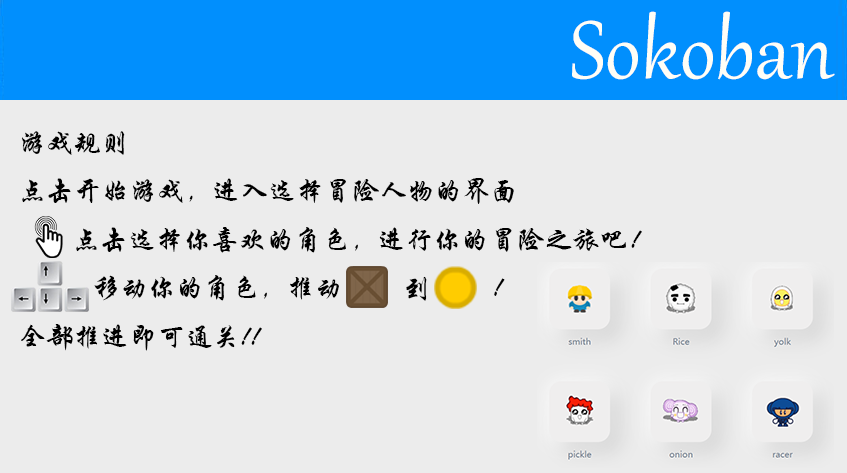
<style>
.page{position:relative;width:847px;height:473px;background:#ececec}
.page>*{position:absolute;margin:0}
.t1{font:100px "Gabriola";color:#fffef6}
.t2{font:27.8px "STXingkai";color:#000000}
</style>
<div class="page">
<p class="t1" style="left:572px;top:11px;width:263px;height:69px">Sokoban</p>
<p class="t2" style="left:21px;top:131px;width:621px;height:220px">游戏规则<br>点击开始游戏，进入选择冒险人物的界面<br>        点击选择你喜欢的角色，进行你的冒险之旅吧！<br>           移动你的角色，推动         到         !<br>全部推进即可通关!!</p>
</div>
